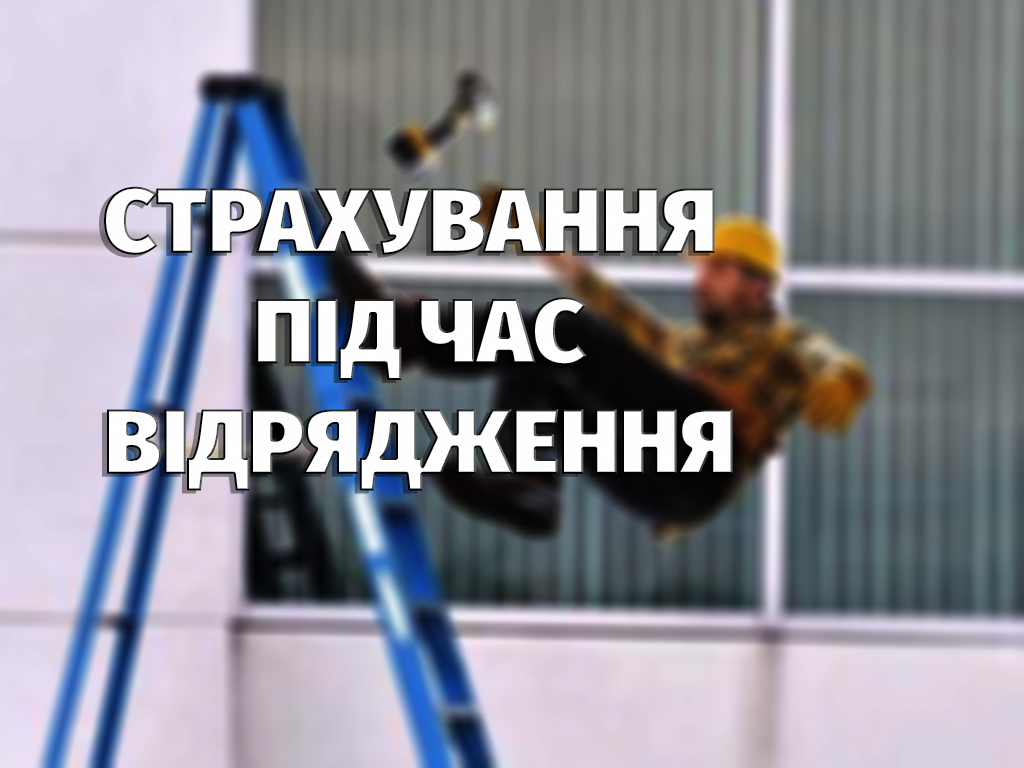
<style>
.page{position:relative;width:1024px;height:768px}
.page>*{position:absolute;margin:0}
.t1{font:92px "FiraSans-Ultra";color:#ffffff}
</style>
<div class="page">
<p class="t1" style="left:104px;top:186px;width:629px;height:305px;text-align:center">СТРАХУВАННЯ <br>ПІД ЧАС<br>ВІДРЯДЖЕННЯ</p>
</div>
